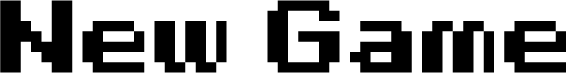
<style>
.page{position:relative;width:566px;height:73px;background:#ffffff}
.page>*{position:absolute;margin:0}
.t1{font:72px "Nineteen-Eighty-Seven";color:#000000}
</style>
<div class="page">
<p class="t1" style="left:0px;top:0px;width:566px;height:73px">New Game</p>
</div>
